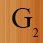
<style>
.page{position:relative;width:43px;height:43px}
.page>*{position:absolute;margin:0}
.t1{font:30px "TimesNewRomanPSMT";color:#0c0c0b}
.t2{font:12px "TimesNewRomanPSMT";color:#0c0c0b}
</style>
<div class="page">
<p class="t1" style="left:12px;top:8px;width:21px;height:20px">G</p>
<p class="t2" style="left:32px;top:28px;width:7px;height:9px">2</p>
</div>
